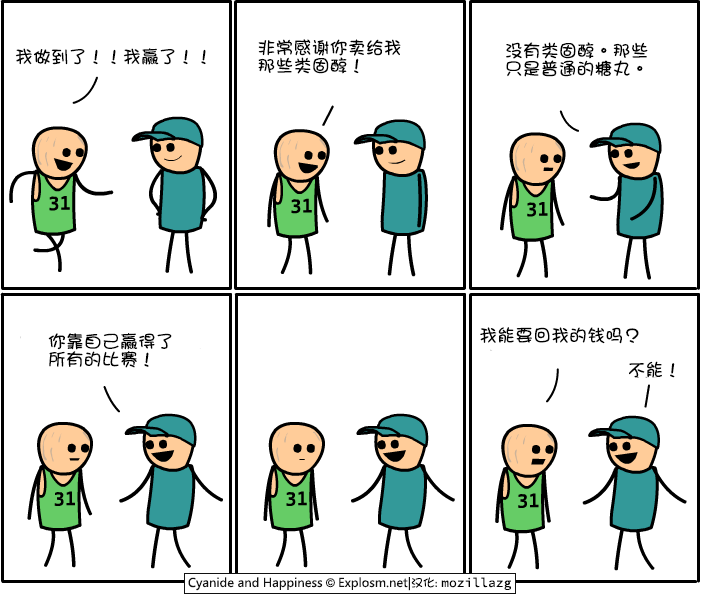
<style>
.page{position:relative;width:701px;height:595px;background:#ffffff}
.page>*{position:absolute;margin:0}
.t1{font:18px/18px "DFGirl";color:#000000}
.t2{font:18px "DFGirl";color:#000000}
</style>
<div class="page">
<p class="t1" style="left:258px;top:39px;width:143px;height:35px">非常感谢你卖给我<br>那些类固醇！</p>
<p class="t2" style="left:15px;top:48px;width:191px;height:17px">我做到了！！我赢了！！</p>
<p class="t1" style="left:506px;top:42px;width:142px;height:35px">没有类固醇。那些<br>只是普通的糖丸。</p>
<p class="t2" style="left:480px;top:327px;width:159px;height:17px">我能要回我的钱吗？</p>
<p class="t1" style="left:48px;top:333px;width:124px;height:35px">你靠自己赢得了<br>所有的比赛！</p>
<p class="t2" style="left:629px;top:361px;width:46px;height:17px">不能！</p>
</div>
